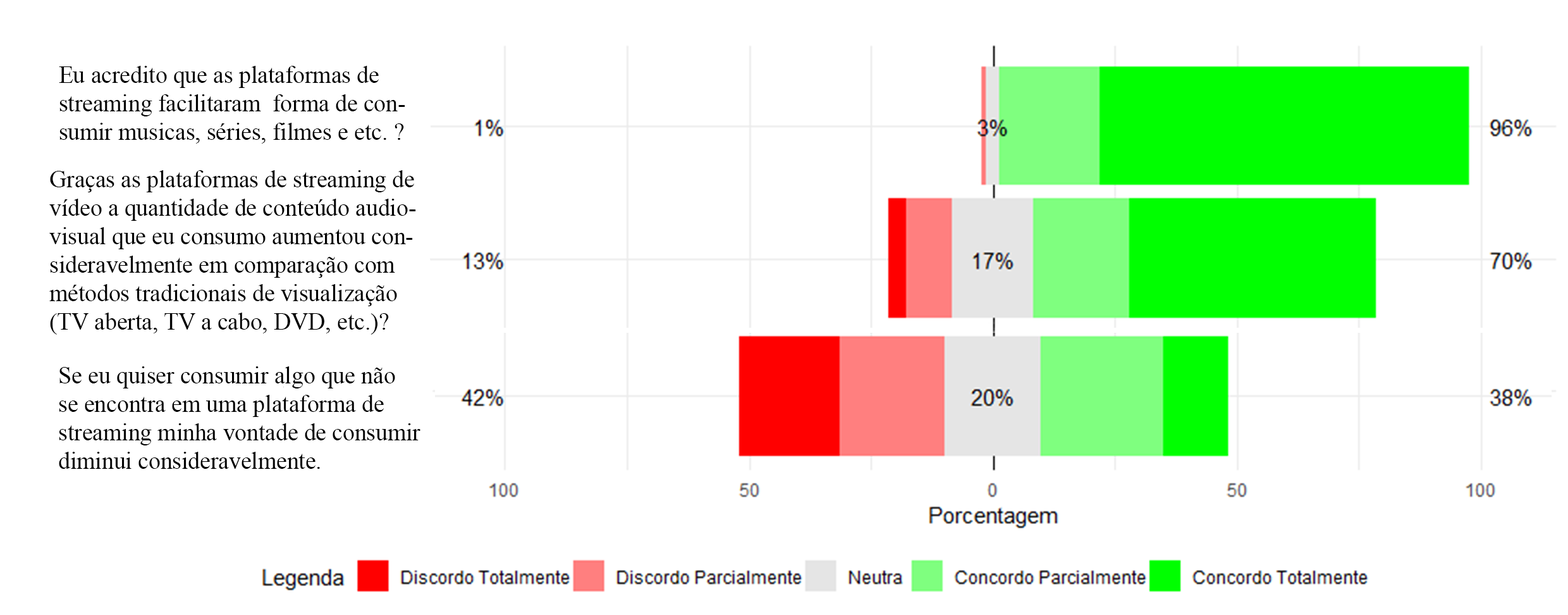
<style>
.page{position:relative;width:1568px;height:615px;background:#ffffff}
.page>*{position:absolute;margin:0}
.t1{font:23.7px "TimesNewRomanPSMT";color:#000000}
</style>
<div class="page">
<p class="t1" style="left:59px;top:66px;width:346px;height:78px">Eu acredito que as plataformas de <br>streaming facilitaram  forma de con-<br>sumir musicas, séries, filmes e etc. ?</p>
<p class="t1" style="left:49px;top:170px;width:367px;height:164px">Graças as plataformas de streaming de <br>vídeo a quantidade de conteúdo audio-<br>visual que eu consumo aumentou con-<br>sideravelmente em comparação com <br>métodos tradicionais de visualização <br>(TV aberta, TV a cabo, DVD, etc.)?</p>
<p class="t1" style="left:59px;top:366px;width:361px;height:103px">Se eu quiser consumir algo que não <br>se encontra em uma plataforma de <br>streaming minha vontade de consumir <br>diminui consideravelmente.</p>
</div>
